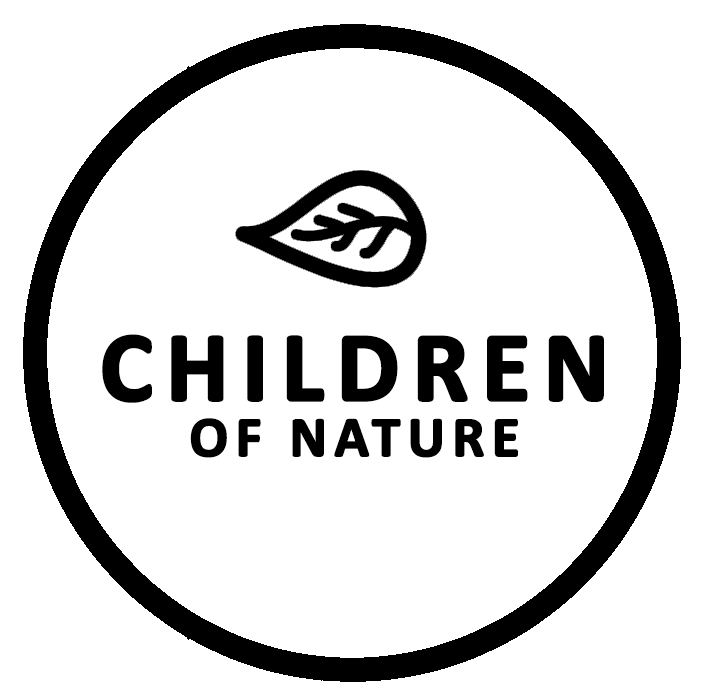
<style>
.page{position:relative;width:702px;height:700px;background:#ffffff}
.page>*{position:absolute;margin:0}
.t1{font:100.3px "Calibri-Bold";letter-spacing:0.1em;color:#000000;font-weight:bold}
.t2{font:57.3px "Calibri-Bold";letter-spacing:0.1em;color:#000000;font-weight:bold}
</style>
<div class="page">
<p class="t1" style="left:102px;top:334px;width:502px;height:69px">CHILDREN</p>
<p class="t2" style="left:190px;top:418px;width:328px;height:40px"><span class="t1"> <br></span>OF NATURE</p>
</div>
